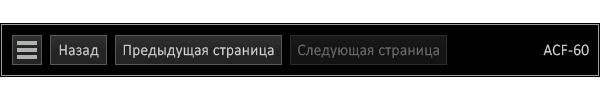
<style>
.page{position:relative;width:600px;height:100px;background:#ffffff}
.page>*{position:absolute;margin:0}
.t1{font:16px "Calibri-Light";letter-spacing:0.02em;color:#d7d7d7;scale:0.96 1}
.t2{font:16px "Calibri-Light";letter-spacing:0.02em;color:#6c6c6c;scale:0.96 1}
</style>
<div class="page">
<p class="t1" style="left:59px;top:44px;width:40px;height:14px">Назад</p>
<p class="t1" style="left:123px;top:44px;width:151px;height:14px">Предыдущая страница</p>
<p class="t2" style="left:298px;top:44px;width:141px;height:14px">Следующая страница</p>
<p class="t1" style="left:543px;top:44px;width:46px;height:12px">ACF-60</p>
</div>
